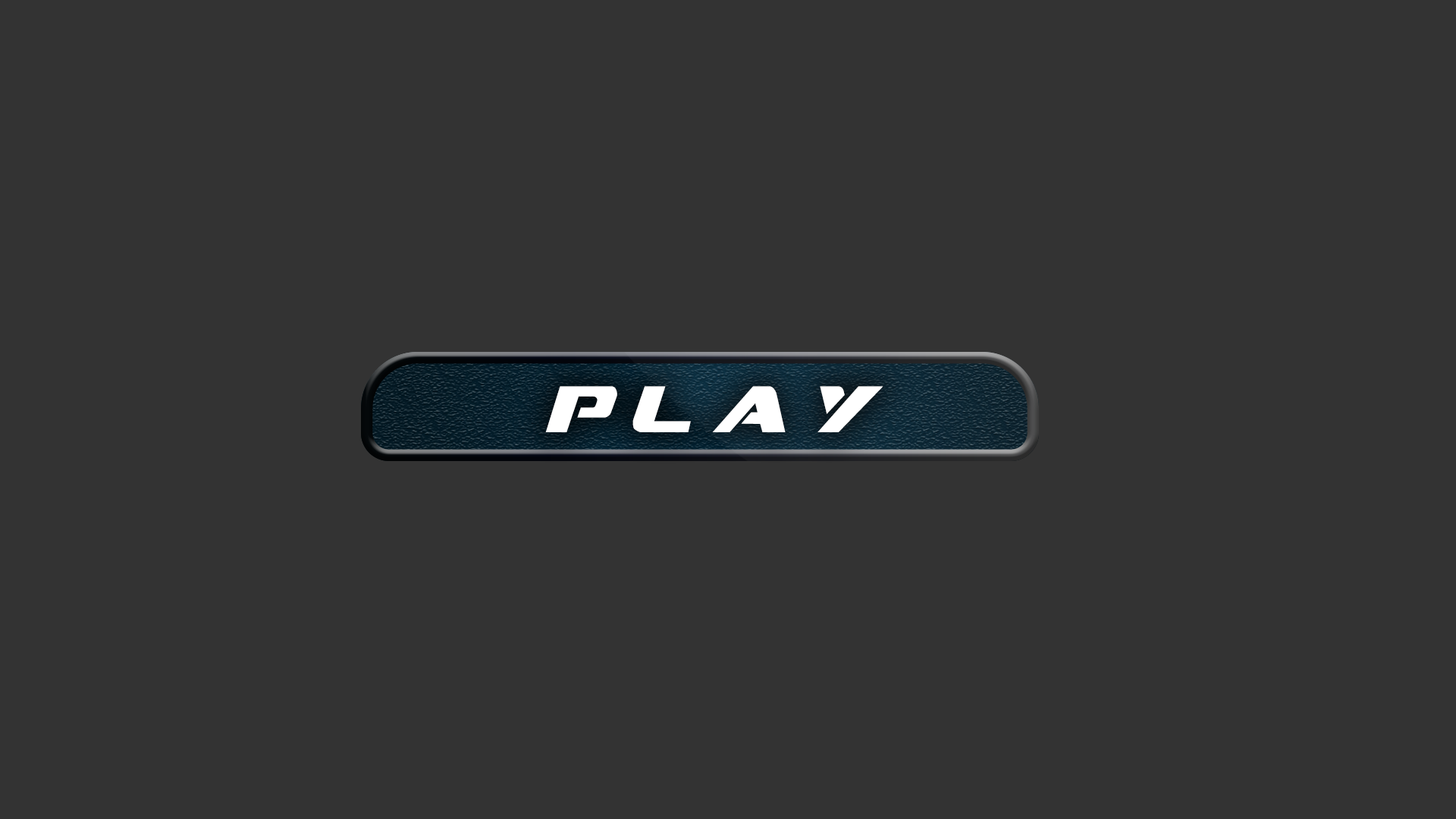
<style>
.page{position:relative;width:1456px;height:819px;background:#333333}
.page>*{position:absolute;margin:0}
.t1{font:65.4px "DreamMMA";letter-spacing:0.34em;color:#ffffff}
</style>
<div class="page">
<p class="t1" style="left:545px;top:386px;width:338px;height:46px">play</p>
</div>
